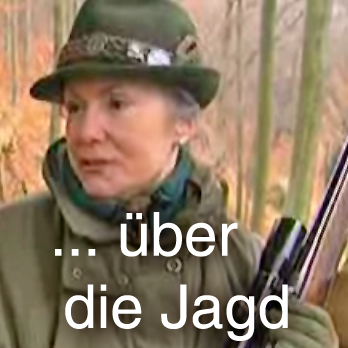
<style>
.page{position:relative;width:348px;height:348px}
.page>*{position:absolute;margin:0}
.t1{font:60.3px "Helvetica";color:#ffffff}
</style>
<div class="page">
<p class="t1" style="left:55px;top:212px;width:233px;height:129px;text-align:center">... über    <br>die Jagd</p>
</div>
